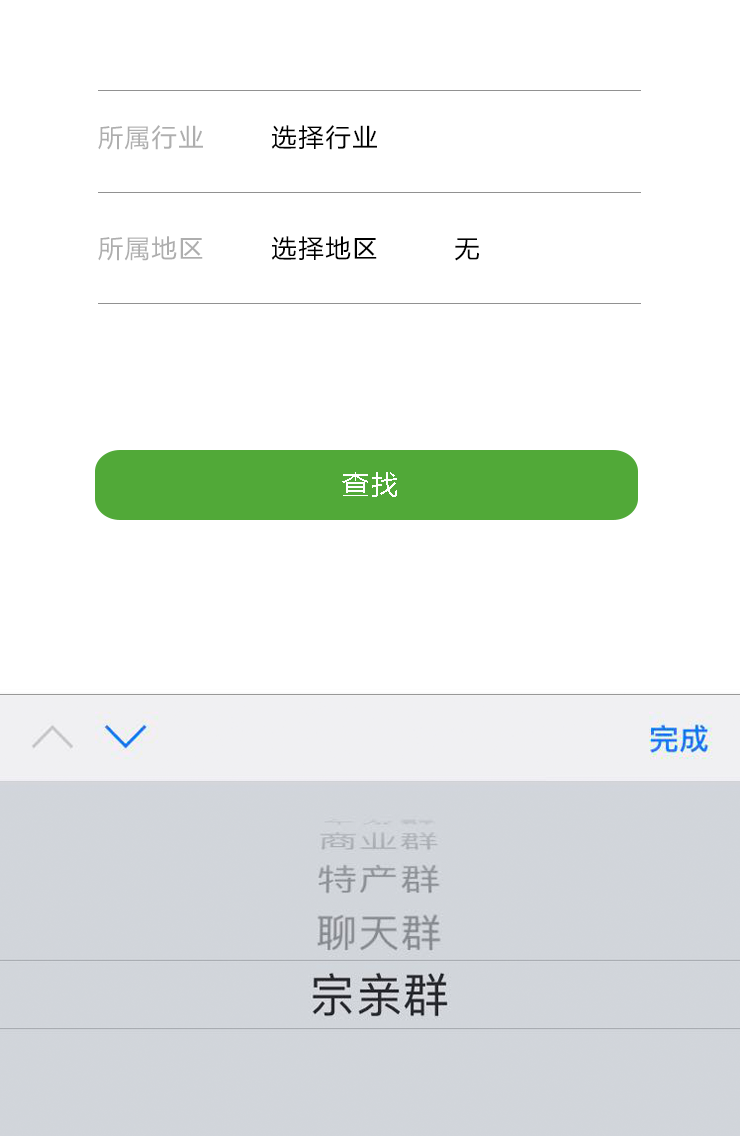
<style>
.page{position:relative;width:740px;height:1136px;background:#ffffff}
.page>*{position:absolute;margin:0}
.t1{font:25px "MicrosoftYaHei";letter-spacing:0.08em}
.t2{font:27.3px "MicrosoftYaHei";letter-spacing:0.08em;color:#ffffff}
</style>
<div class="page">
<p class="t1" style="left:98px;top:125px;width:279px;height:25px">所属行业       选择行业</p>
<p class="t1" style="left:98px;top:236px;width:381px;height:25px">所属地区       选择地区        无</p>
<p class="t2" style="left:342px;top:472px;width:55px;height:25px">查找</p>
</div>
